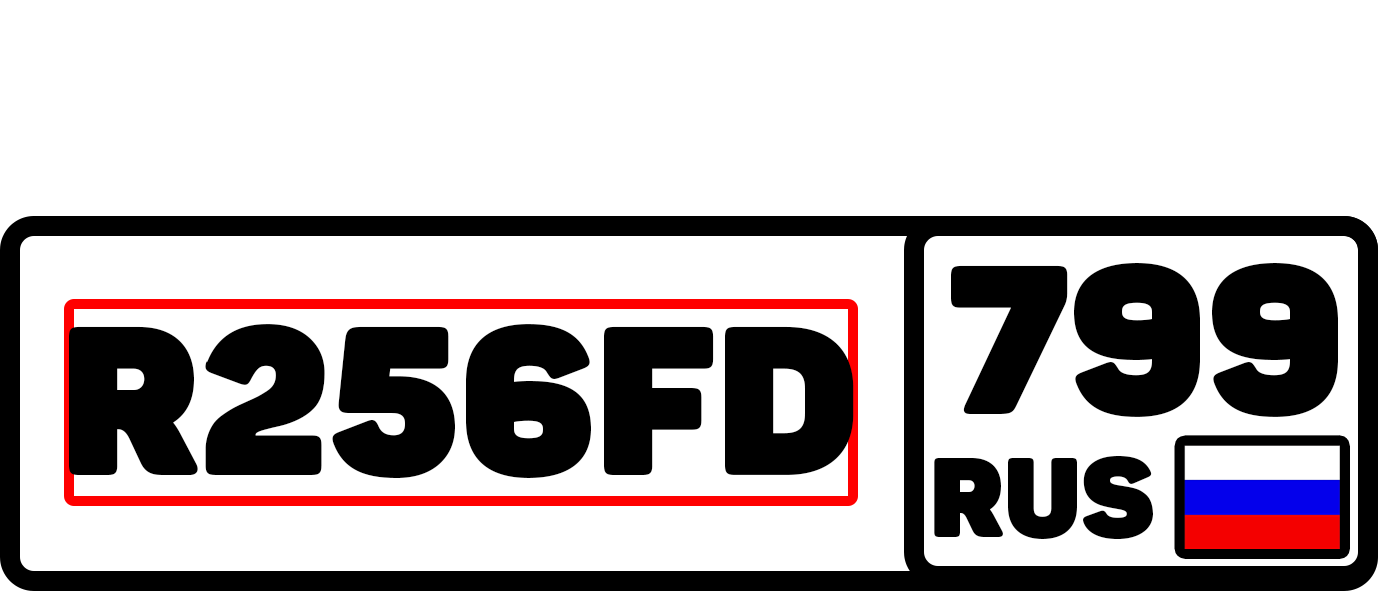
<style>
.page{position:relative;width:1378px;height:591px;background:#ffffff}
.page>*{position:absolute;margin:0}
.t1{font:208.3px "Panton-ExtraBlack";color:#000000;text-transform:uppercase}
.t2{font:111.1px "Panton-ExtraBlack";color:#000000;text-transform:uppercase}
</style>
<div class="page">
<p class="t1" style="left:951px;top:263px;width:387px;height:154px">799</p>
<p class="t1" style="left:69px;top:324px;width:785px;height:154px">R256FD</p>
<p class="t2" style="left:934px;top:455px;width:219px;height:84px">RUS</p>
</div>
